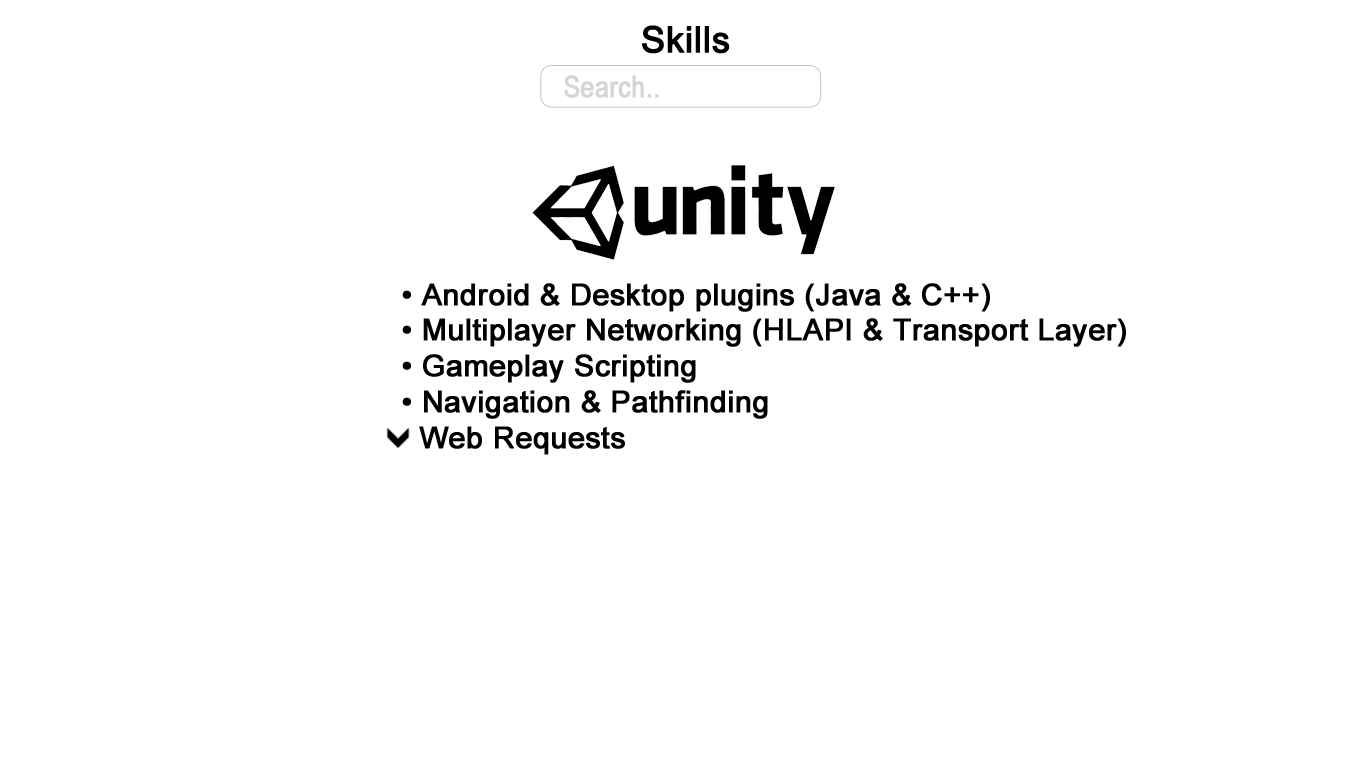
<style>
.page{position:relative;width:1366px;height:768px;background:#ffffff}
.page>*{position:absolute;margin:0}
.t1{font:36px "ArialMT";color:#000000;font-weight:bold}
.t2{font:30px "ArialNarrow";color:#d5d5d5;font-weight:bold}
.t3{font:30px "ArialMT";color:#000000;font-weight:bold}
</style>
<div class="page">
<p class="t1" style="left:642px;top:25px;width:88px;height:29px">Skills</p>
<p class="t2" style="left:564px;top:75px;width:95px;height:23px">Search..</p>
<p class="t3" style="left:402px;top:283px;width:588px;height:29px">• Android &amp; Desktop plugins (Java &amp; C++)</p>
<p class="t3" style="left:402px;top:318px;width:724px;height:29px">• Multiplayer Networking (HLAPI &amp; Transport Layer)</p>
<p class="t3" style="left:402px;top:354px;width:294px;height:29px">• Gameplay Scripting</p>
<p class="t3" style="left:402px;top:390px;width:366px;height:29px">• Navigation &amp; Pathfinding</p>
<p class="t3" style="left:419px;top:426px;width:206px;height:29px">Web Requests</p>
</div>
